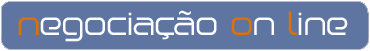
<style>
.page{position:relative;width:370px;height:51px;background:#5e75a1}
.page>*{position:absolute;margin:0}
.t1{font:30px "Birdman";color:#ffffff}
.t2{font:30px "Birdman";color:#de7008}
.t3{font:24px "ArialMT";color:#fefefe}
</style>
<div class="page">
<p class="t1" style="left:18px;top:11px;width:330px;height:31px"><span class="t2">n</span>egociacao <span class="t2">o</span>n <span class="t2">l</span>ine</p>
<p class="t3" style="left:179px;top:10px;width:12px;height:5px">~</p>
</div>
